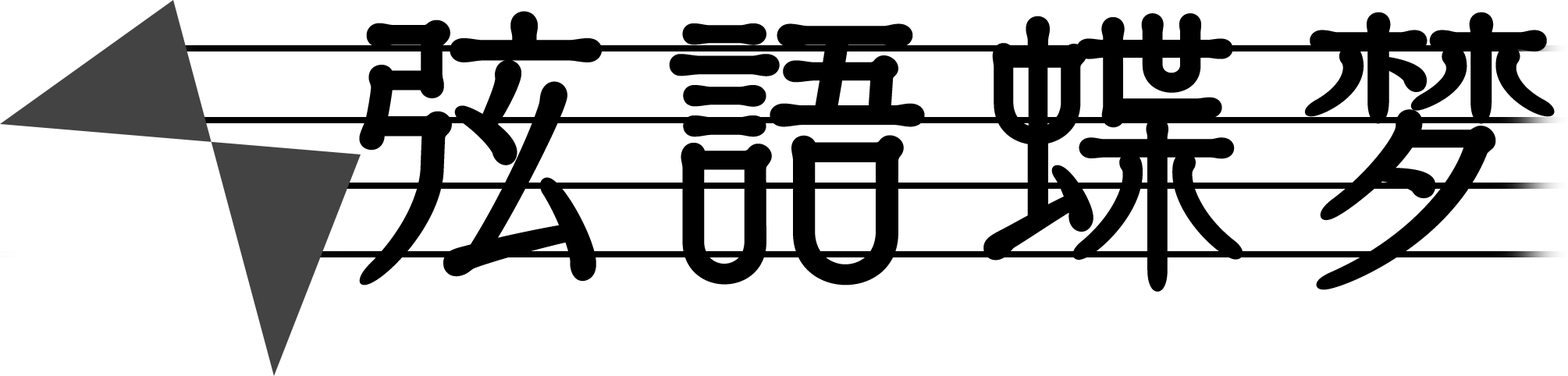
<style>
.page{position:relative;width:1568px;height:376px;background:#ffffff}
.page>*{position:absolute;margin:0}
.t1{font:312.2px "LyraStd-DB";letter-spacing:-0.01em;color:#000000;font-weight:bold}
</style>
<div class="page">
<p class="t1" style="left:359px;top:11px;width:1196px;height:281px">弦語蝶梦</p>
</div>
